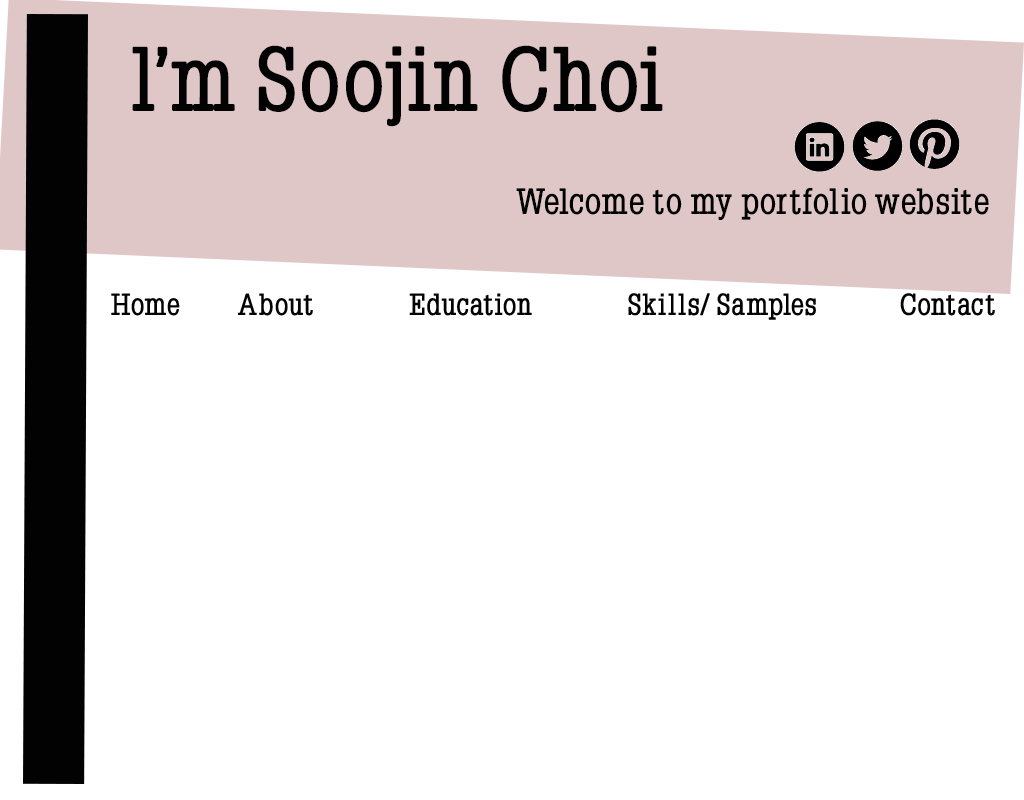
<style>
.page{position:relative;width:1024px;height:800px;background:#ffffff}
.page>*{position:absolute;margin:0}
.t1{font:90px "Napoleon-Bold";color:#020202}
.t2{font:36px "Napoleon-Bold";color:#020202}
.t3{font:30px "Napoleon-Bold";color:#020202}
</style>
<div class="page">
<p class="t1" style="left:132px;top:45px;width:531px;height:82px">l’m Soojin Choi</p>
<p class="t2" style="left:516px;top:187px;width:473px;height:33px">Welcome to my portfolio website</p>
<p class="t3" style="left:111px;top:293px;width:884px;height:27px">Home     About         Education     Skills/ Samples       Contact</p>
</div>
